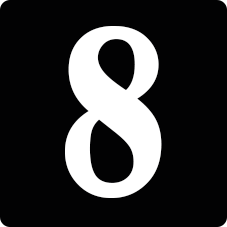
<style>
.page{position:relative;width:227px;height:227px;background:#020203}
.page>*{position:absolute;margin:0}
.t1{font:216px "BernardMT-Condensed";color:#ffffff}
</style>
<div class="page">
<p class="t1" style="left:65px;top:26px;width:97px;height:172px">8</p>
</div>
